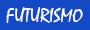
<style>
.page{position:relative;width:90px;height:30px;background:#1349c4}
.page>*{position:absolute;margin:0}
.t1{font:20px "Mistral";color:#ffffff}
</style>
<div class="page">
<p class="t1" style="left:6px;top:7px;width:77px;height:16px">FUTURISMO</p>
</div>
